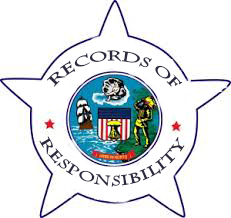
<style>
.page{position:relative;width:231px;height:218px;background:#ffffff}
.page>*{position:absolute;margin:0}
.t1{font:14px "CharlemagneStd-Bold";color:#2c293f}
</style>
<div class="page">
<p class="t1" style="left:46px;top:50px;width:137px;height:37px;rotate:14deg">Records of</p>
<p class="t1" style="left:39px;top:136px;width:146px;height:51px">Responsibility</p>
</div>
